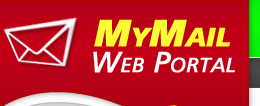
<style>
.page{position:relative;width:260px;height:106px}
.page>*{position:absolute;margin:0}
.t1{font:37.5px "AGForeignerBoldItalic";letter-spacing:-0.01em;color:#ffff33;font-variant:small-caps;font-weight:bold}
.t2{font:29.2px "AGForeignerItalicMedium";letter-spacing:-0.01em;color:#ffffff;font-variant:small-caps;font-weight:bold}
</style>
<div class="page">
<p class="t1" style="left:94px;top:19px;width:136px;height:28px">MyMail</p>
<p class="t2" style="left:93px;top:51px;width:142px;height:22px">Web Portal</p>
</div>
